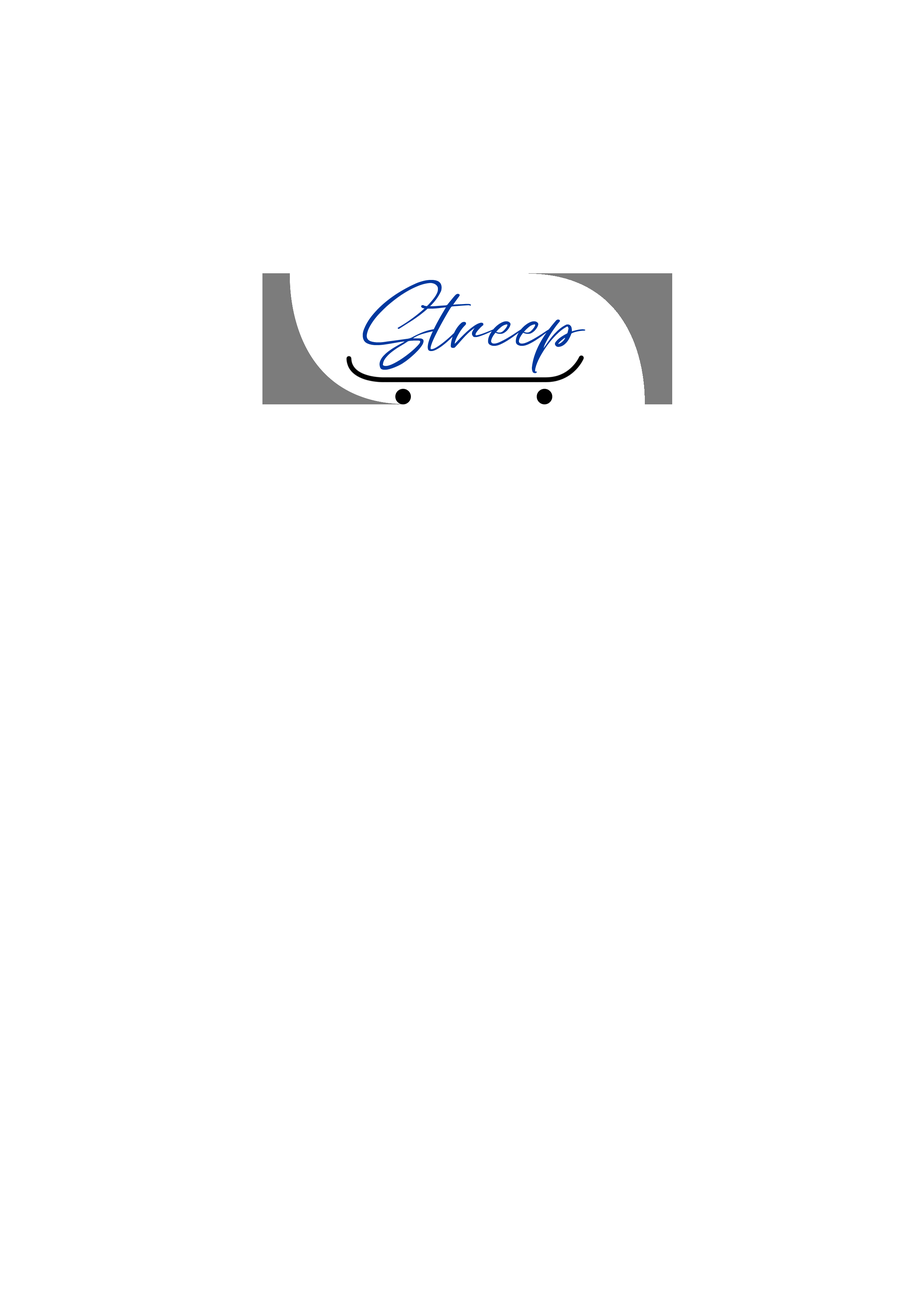
<style>
.page{position:relative;width:918px;height:1299px;background:#ffffff}
.page>*{position:absolute;margin:0}
.t1{font:111.1px "Bresley-Regular";color:#00389f}
</style>
<div class="page">
<p class="t1" style="left:363px;top:280px;width:222px;height:93px">Streep</p>
</div>
